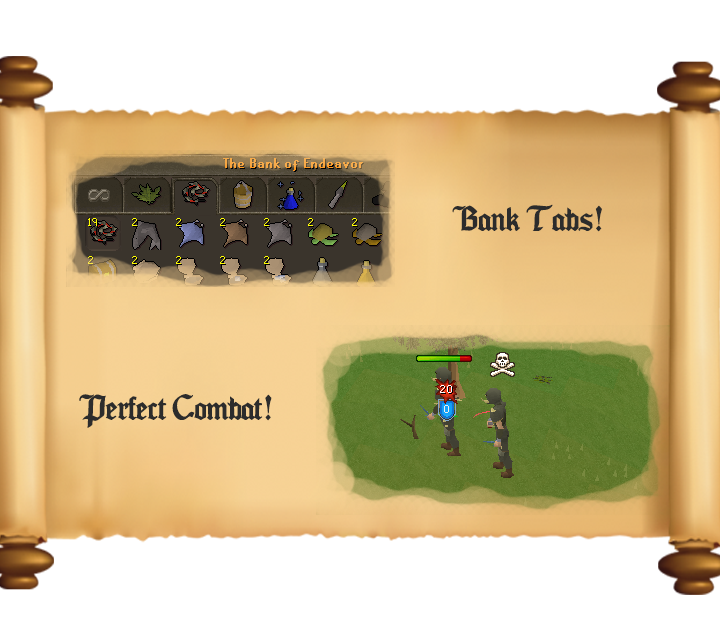
<style>
.page{position:relative;width:720px;height:628px;background:#ffffff}
.page>*{position:absolute;margin:0}
.t1{font:30px "Seagramtfb";letter-spacing:-0.03em;color:#2c2c2c}
</style>
<div class="page">
<p class="t1" style="left:452px;top:204px;width:150px;height:28px">Bank Tabs!</p>
<p class="t1" style="left:79px;top:394px;width:193px;height:34px">Perfect Combat!</p>
</div>
